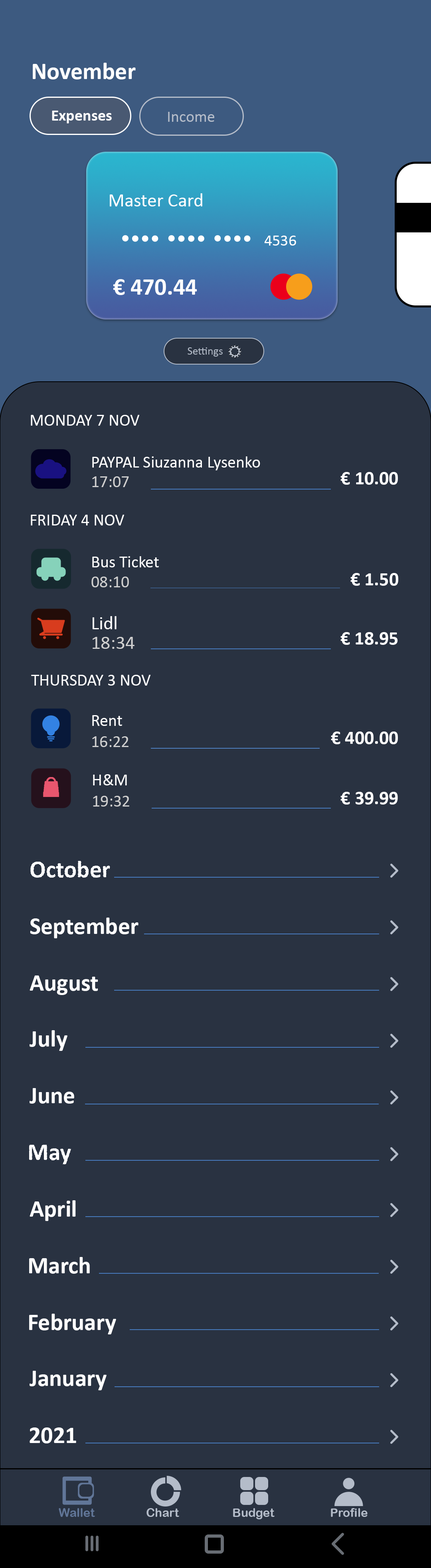
<style>
.page{position:relative;width:431px;height:1568px;background:#293241}
.page>*{position:absolute;margin:0}
.t1{font:24px "Calibri-Bold";color:#ffffff}
.t2{font:16px "Calibri-Bold";color:#ffffff}
.t3{font:16px "Calibri";color:#b4bcc9}
.t4{font:19.2px "Calibri";color:#ffffff}
.t5{font:16px "Calibri";color:#ffffff}
.t6{font:11.2px "Calibri";color:#b4bcc9}
.t7{font:16.8px "Calibri";color:#ffffff}
.t8{font:19.2px "Calibri-Bold";color:#ffffff}
.t9{font:16.8px "Calibri";color:#cfcfcf}
.t10{font:19.2px "Calibri";color:#cfcfcf}
.t11{font:12px "ArialRoundedMTBold";color:#617698}
.t12{font:12px "ArialRoundedMTBold";color:#b4bcc9}
</style>
<div class="page">
<p class="t1" style="left:33px;top:63px;width:103px;height:16px">November</p>
<p class="t2" style="left:52px;top:111px;width:60px;height:12px">Expenses</p>
<p class="t3" style="left:168px;top:112px;width:46px;height:10px">Income</p>
<p class="t4" style="left:110px;top:193px;width:92px;height:13px">Master Card</p>
<p class="t5" style="left:264px;top:236px;width:32px;height:10px">4536</p>
<p class="t1" style="left:113px;top:279px;width:84px;height:16px">€ 470.44</p>
<p class="t6" style="left:188px;top:347px;width:35px;height:10px">Settings</p>
<p class="t7" style="left:31px;top:415px;width:109px;height:11px">MONDAY 7 NOV</p>
<p class="t7" style="left:92px;top:456px;width:168px;height:14px">PAYPAL Siuzanna Lysenko</p>
<p class="t8" style="left:341px;top:472px;width:57px;height:13px">€ 10.00</p>
<p class="t9" style="left:92px;top:476px;width:37px;height:11px">17:07</p>
<p class="t7" style="left:31px;top:515px;width:94px;height:10px">FRIDAY 4 NOV</p>
<p class="t7" style="left:92px;top:556px;width:67px;height:11px">Bus Ticket</p>
<p class="t9" style="left:91px;top:577px;width:38px;height:10px">08:10</p>
<p class="t8" style="left:351px;top:573px;width:47px;height:13px">€ 1.50</p>
<p class="t4" style="left:93px;top:616px;width:24px;height:13px">Lidl</p>
<p class="t10" style="left:93px;top:637px;width:42px;height:12px">18:34</p>
<p class="t8" style="left:341px;top:632px;width:57px;height:13px">€ 18.95</p>
<p class="t7" style="left:31px;top:675px;width:120px;height:11px">THURSDAY 3 NOV</p>
<p class="t7" style="left:92px;top:715px;width:30px;height:11px">Rent</p>
<p class="t9" style="left:92px;top:736px;width:37px;height:11px">16:22</p>
<p class="t8" style="left:331px;top:731px;width:67px;height:13px">€ 400.00</p>
<p class="t7" style="left:93px;top:774px;width:34px;height:11px">H&amp;M</p>
<p class="t9" style="left:93px;top:796px;width:36px;height:11px">19:32</p>
<p class="t8" style="left:341px;top:792px;width:57px;height:13px">€ 39.99</p>
<p class="t1" style="left:30px;top:861px;width:80px;height:17px">October</p>
<p class="t1" style="left:30px;top:918px;width:109px;height:20px">September</p>
<p class="t1" style="left:30px;top:975px;width:68px;height:20px">August</p>
<p class="t1" style="left:30px;top:1030px;width:37px;height:21px">July</p>
<p class="t1" style="left:30px;top:1088px;width:44px;height:16px">June</p>
<p class="t1" style="left:29px;top:1145px;width:42px;height:19px">May</p>
<p class="t1" style="left:30px;top:1200px;width:46px;height:21px">April</p>
<p class="t1" style="left:29px;top:1257px;width:61px;height:17px">March</p>
<p class="t1" style="left:29px;top:1314px;width:87px;height:20px">February</p>
<p class="t1" style="left:30px;top:1371px;width:77px;height:19px">January</p>
<p class="t1" style="left:30px;top:1427px;width:46px;height:16px">2021</p>
<p class="t11" style="left:59px;top:1508px;width:36px;height:9px">Wallet</p>
<p class="t12" style="left:147px;top:1508px;width:32px;height:9px">Chart</p>
<p class="t12" style="left:233px;top:1508px;width:42px;height:11px">Budget</p>
<p class="t12" style="left:331px;top:1508px;width:37px;height:9px">Profile</p>
</div>
